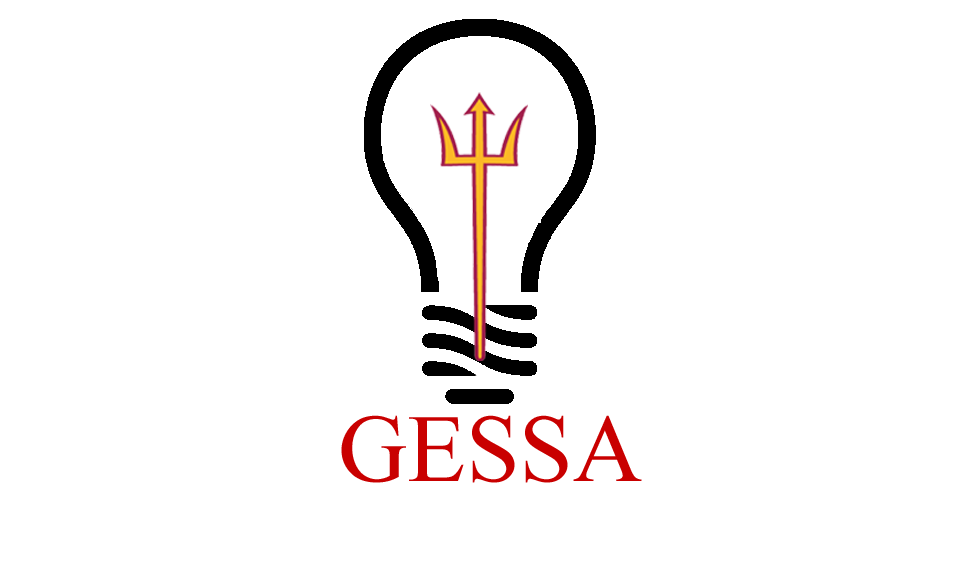
<style>
.page{position:relative;width:960px;height:582px;background:#ffffff}
.page>*{position:absolute;margin:0}
.t1{font:96px "TimesNewRomanPSMT";color:#c90000}
</style>
<div class="page">
<p class="t1" style="left:341px;top:415px;width:301px;height:68px">GESSA</p>
</div>
